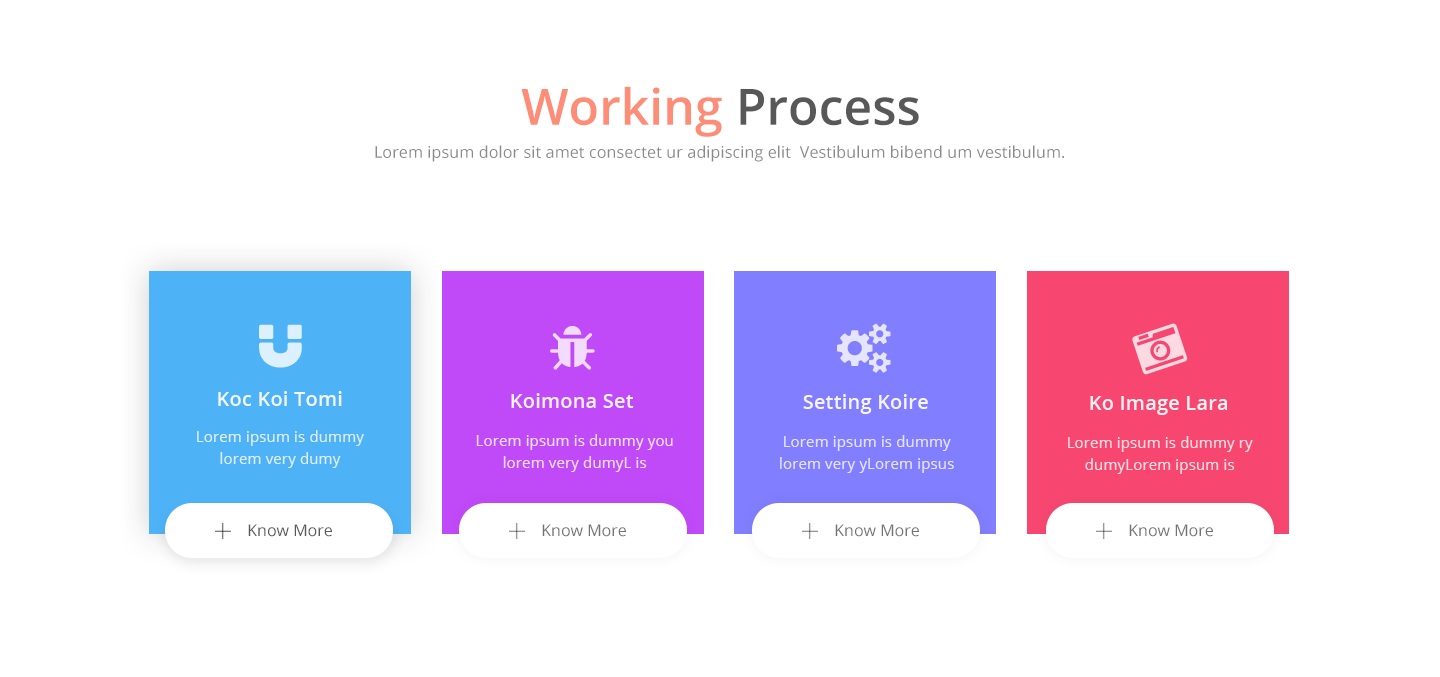
<style>
.page{position:relative;width:1440px;height:677px;background:#ffffff}
.page>*{position:absolute;margin:0}
.t1{font:50px "OpenSans-Semibold"}
.t2{font:16px "OpenSans";letter-spacing:0.01em;color:#8a8a8a}
.t3{font:20px "OpenSans-Semibold";letter-spacing:0.01em;color:#ffffff}
.t4{font:15px/22px "OpenSans";letter-spacing:0.01em;color:#dcedfd}
.t5{font:15px/22px "OpenSans";letter-spacing:0.01em;color:#f0dbfd}
.t6{font:15px/22px "OpenSans";letter-spacing:0.01em;color:#e4e3ff}
.t7{font:15px/22px "OpenSans";letter-spacing:0.01em;color:#fddbe1}
.t8{font:16px "OpenSans";color:#585858}
.t9{font:16px "OpenSans";color:#737373}
</style>
<div class="page">
<p class="t1" style="left:521px;top:86px;width:398px;height:51px">Working Process</p>
<p class="t2" style="left:375px;top:145px;width:689px;height:17px">Lorem ipsum dolor sit amet consectet ur adipiscing elit  Vestibulum bibend um vestibulum.</p>
<p class="t3" style="left:218px;top:391px;width:124px;height:15px;opacity:0.9">Koc Koi Tomi</p>
<p class="t3" style="left:511px;top:393px;width:123px;height:15px;opacity:0.9">Koimona Set</p>
<p class="t3" style="left:803px;top:394px;width:125px;height:20px;opacity:0.9">Setting Koire</p>
<p class="t3" style="left:1090px;top:396px;width:137px;height:19px;opacity:0.9">Ko Image Lara</p>
<p class="t4" style="left:197px;top:430px;width:167px;height:38px;text-align:center">Lorem ipsum is dummy lorem very dumy</p>
<p class="t5" style="left:476px;top:434px;width:197px;height:38px;text-align:center">Lorem ipsum is dummy you   lorem very dumyL is</p>
<p class="t6" style="left:780px;top:435px;width:174px;height:38px;text-align:center">Lorem ipsum is dummy lorem very yLorem ipsus</p>
<p class="t7" style="left:1068px;top:436px;width:185px;height:38px;text-align:center">Lorem ipsum is dummy ry dumyLorem ipsum is</p>
<p class="t8" style="left:248px;top:524px;width:84px;height:13px">Know More</p>
<p class="t9" style="left:542px;top:524px;width:84px;height:13px">Know More</p>
<p class="t9" style="left:835px;top:524px;width:84px;height:13px">Know More</p>
<p class="t9" style="left:1129px;top:524px;width:84px;height:13px">Know More</p>
</div>
